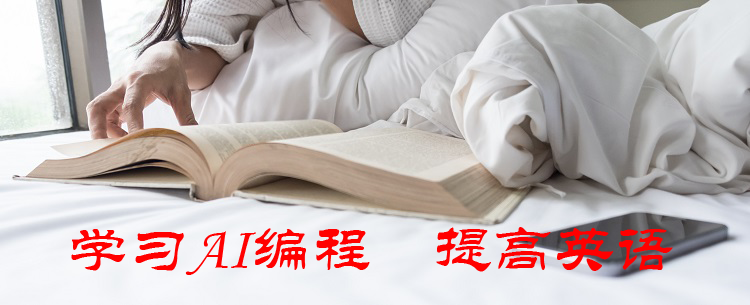
<style>
.page{position:relative;width:750px;height:305px}
.page>*{position:absolute;margin:0}
.t1{font:61px "STLiti";color:#ff0000}
</style>
<div class="page">
<p class="t1" style="left:71px;top:227px;width:602px;height:48px">学习AI编程    提高英语</p>
</div>
